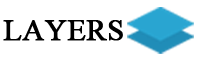
<style>
.page{position:relative;width:200px;height:60px;background:#ffffff}
.page>*{position:absolute;margin:0}
.t1{font:30px "TimesNewRomanPSMT";color:#000000;font-weight:bold}
</style>
<div class="page">
<p class="t1" style="left:3px;top:20px;width:120px;height:21px">LAYERS</p>
</div>
